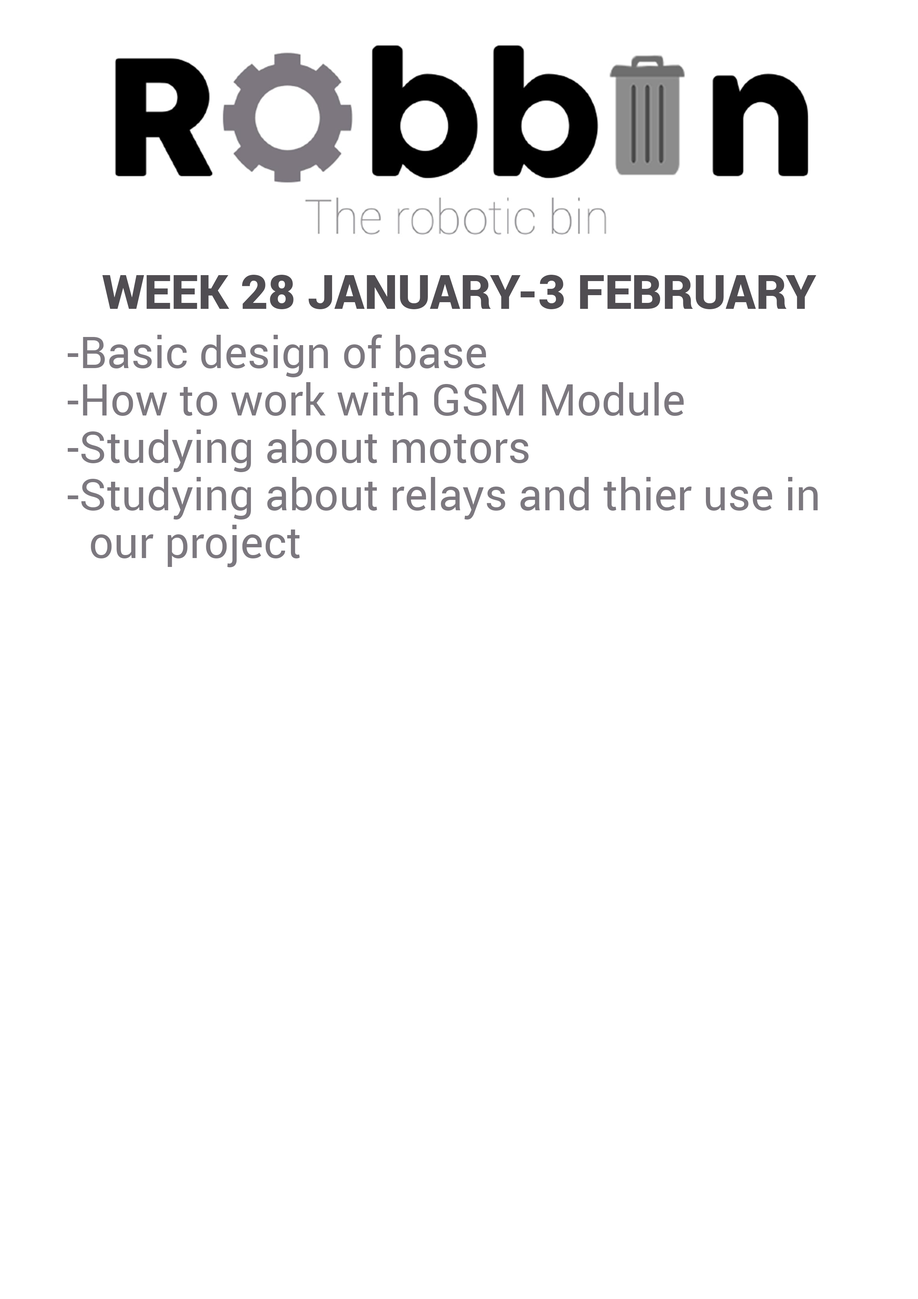
<style>
.page{position:relative;width:918px;height:1299px;background:#ffffff}
.page>*{position:absolute;margin:0}
.t1{font:47.4px "Roboto-Black";color:#504d52;text-transform:uppercase}
.t2{font:43.8px/47.4px "Roboto-Regular";color:#7c787f}
</style>
<div class="page">
<p class="t1" style="left:102px;top:275px;width:715px;height:34px">Week 28 January-3 february</p>
<p class="t2" style="left:68px;top:334px;width:750px;height:233px">-Basic design of base<br>-How to work with GSM Module<br>-Studying about motors<br>-Studying about relays and thier use in <br>  our project</p>
</div>
